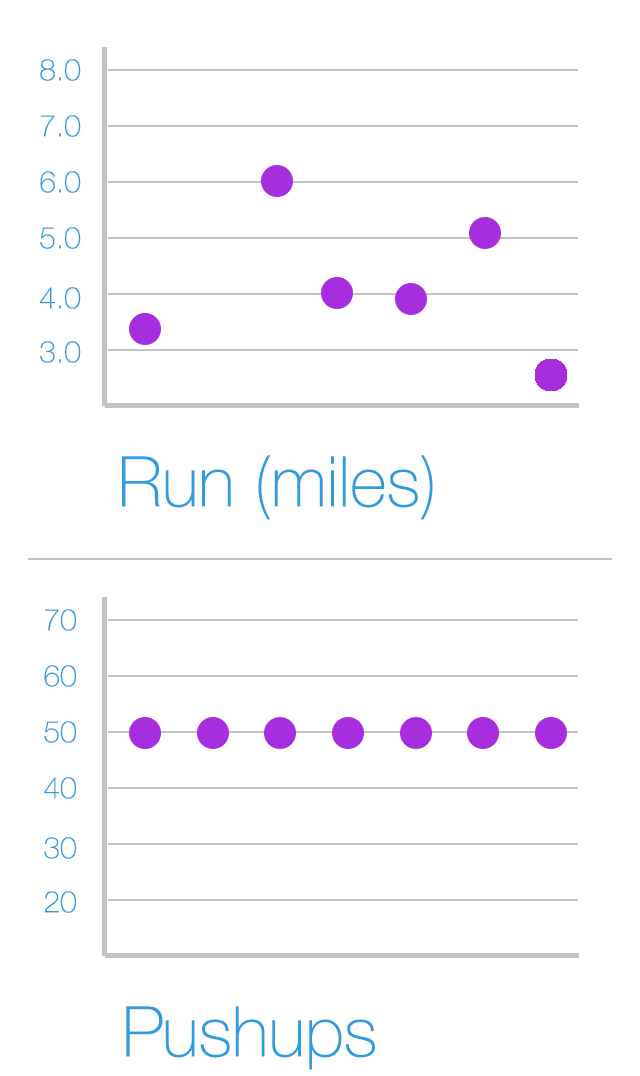
<style>
.page{position:relative;width:640px;height:1076px;background:#ffffff}
.page>*{position:absolute;margin:0}
.t1{font:30px "HelveticaNeue-Thin";color:#2e9cdf}
.t2{font:70px "HelveticaNeue-Thin";color:#2e9cdf}
</style>
<div class="page">
<p class="t1" style="left:40px;top:59px;width:41px;height:22px">8.0</p>
<p class="t1" style="left:40px;top:115px;width:41px;height:22px">7.0</p>
<p class="t1" style="left:40px;top:171px;width:41px;height:22px">6.0</p>
<p class="t1" style="left:40px;top:227px;width:41px;height:22px">5.0</p>
<p class="t1" style="left:40px;top:287px;width:41px;height:22px">4.0</p>
<p class="t1" style="left:40px;top:341px;width:41px;height:22px">3.0</p>
<p class="t2" style="left:122px;top:455px;width:311px;height:65px">Run (miles)</p>
<p class="t1" style="left:45px;top:609px;width:31px;height:22px">70</p>
<p class="t1" style="left:44px;top:665px;width:32px;height:22px">60</p>
<p class="t1" style="left:44px;top:721px;width:32px;height:22px">50</p>
<p class="t1" style="left:44px;top:777px;width:32px;height:22px">40</p>
<p class="t1" style="left:44px;top:837px;width:32px;height:22px">30</p>
<p class="t1" style="left:44px;top:891px;width:32px;height:22px">20</p>
<p class="t2" style="left:126px;top:1006px;width:249px;height:64px">Pushups</p>
</div>
